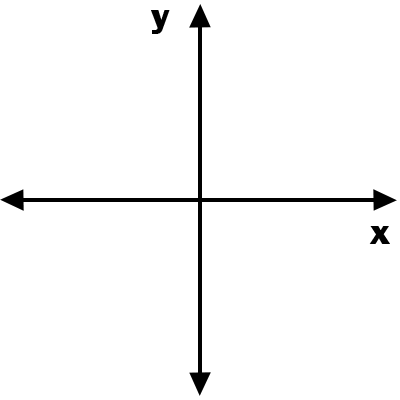
<style>
.page{position:relative;width:400px;height:400px;background:#ffffff}
.page>*{position:absolute;margin:0}
.t1{font:36px "FranklinGothic-Heavy";color:#000000}
</style>
<div class="page">
<p class="t1" style="left:151px;top:10px;width:19px;height:24px">y</p>
<p class="t1" style="left:369px;top:226px;width:21px;height:18px">x</p>
</div>
